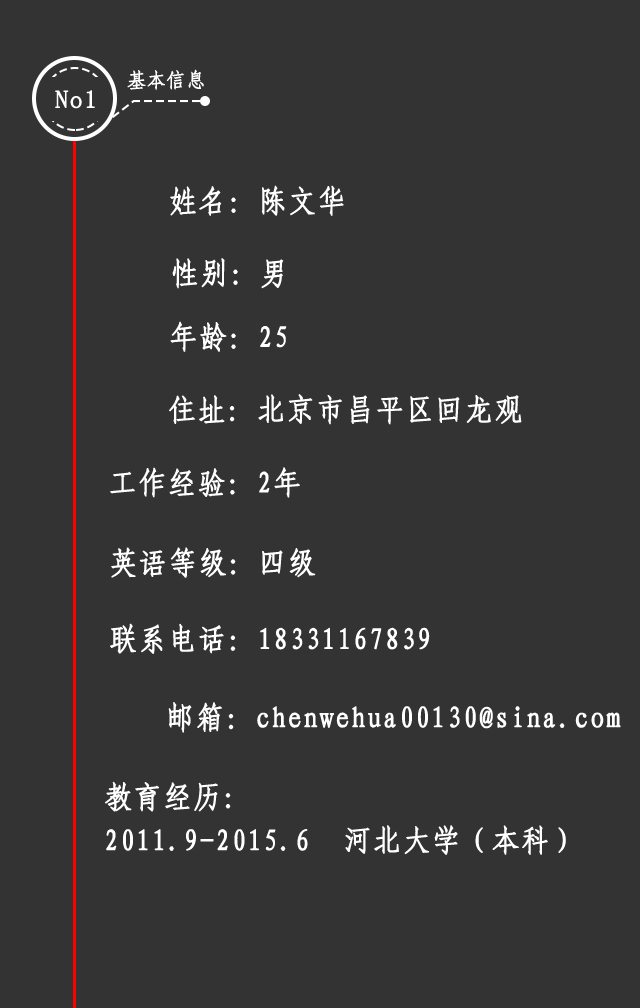
<style>
.page{position:relative;width:640px;height:1008px;background:#333333}
.page>*{position:absolute;margin:0}
.t1{font:20px "-G-s-u-n-0-0-m";letter-spacing:0.05em;color:#ffffff;font-weight:bold;scale:0.92 1}
.t2{font:25px "YouYuan";letter-spacing:0.05em;color:#ffffff;font-weight:bold}
.t3{font:30px "-G-s-u-n-0-0-m";letter-spacing:0.05em;color:#ffffff;font-weight:bold;scale:0.92 1}
.t4{font:30px/12px "-G-s-u-n-0-0-m";letter-spacing:0.05em;color:#ffffff;font-weight:bold;scale:0.92 1}
</style>
<div class="page">
<p class="t1" style="left:127px;top:69px;width:77px;height:21px">基本信息</p>
<p class="t2" style="left:55px;top:90px;width:40px;height:19px">No1</p>
<p class="t3" style="left:170px;top:185px;width:174px;height:31px">姓名：陈文华</p>
<p class="t3" style="left:172px;top:258px;width:112px;height:31px">性别：男</p>
<p class="t3" style="left:170px;top:321px;width:117px;height:31px">年龄：25</p>
<p class="t3" style="left:169px;top:394px;width:353px;height:31px">住址：北京市昌平区回龙观</p>
<p class="t3" style="left:110px;top:467px;width:190px;height:31px">工作经验：2年</p>
<p class="t3" style="left:111px;top:547px;width:205px;height:31px">英语等级：四级</p>
<p class="t3" style="left:110px;top:623px;width:320px;height:31px">联系电话：18331167839</p>
<p class="t3" style="left:168px;top:702px;width:453px;height:31px">邮箱：chenwehua00130@sina.com</p>
<p class="t4" style="left:105px;top:781px;width:461px;height:74px">教育经历：<br><br><br><br><br><br><br><br><br><br><br><br><br><br><br><br><br><br><br><br><br><br><br><br><br><br><br><br><br><br><br><br><br><br><br><br><br><br><br><br><br><br><br><br><br><br>2011.9-2015.6  河北大学（本科）</p>
</div>
